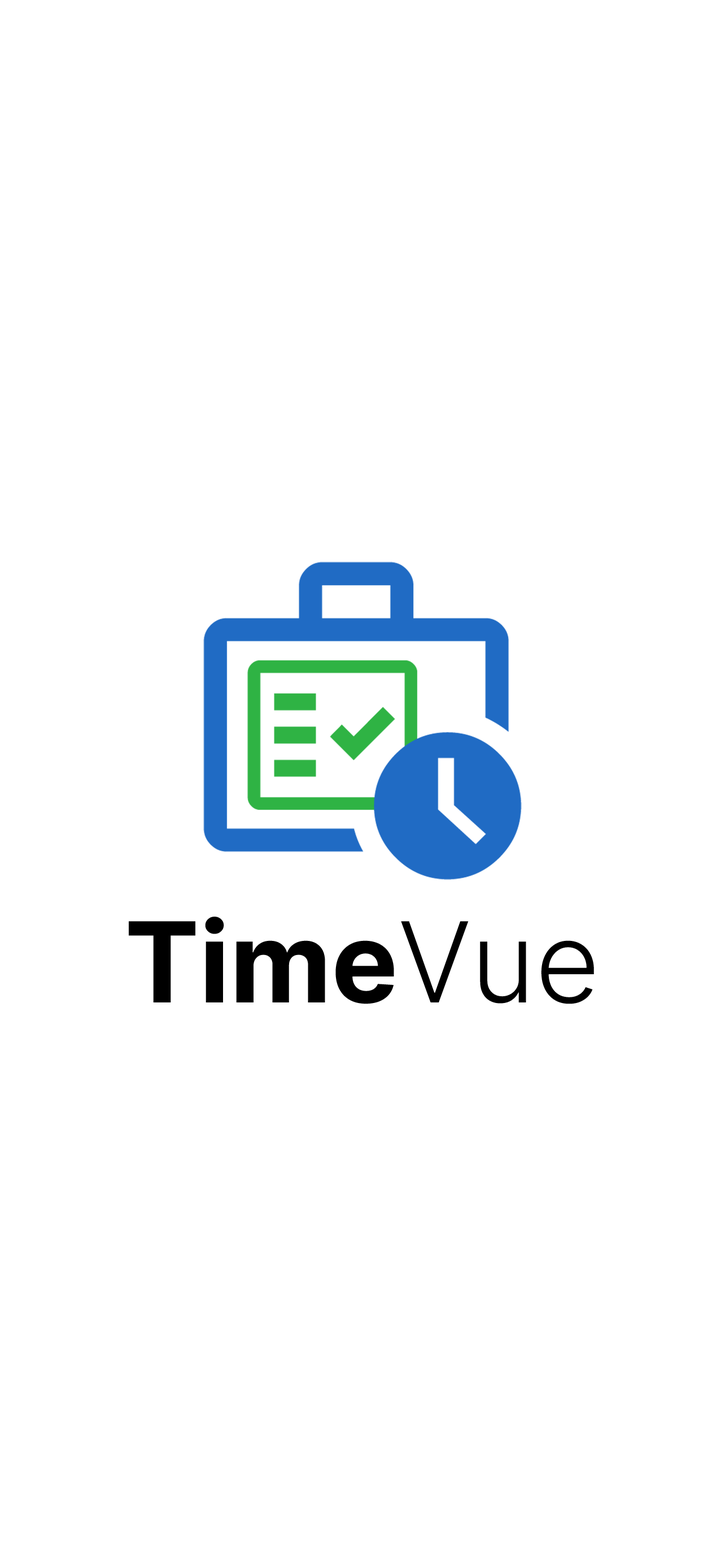
<style>
.page{position:relative;width:725px;height:1568px;background:#ffffff}
.page>*{position:absolute;margin:0}
.t1{font:111.4px "Inter-Bold";color:#000000}
.t2{font:111.4px "Inter-Light";color:#000000}
</style>
<div class="page">
<p class="t1" style="left:129px;top:917px;width:465px;height:87px">Time<span class="t2">Vue</span></p>
</div>
